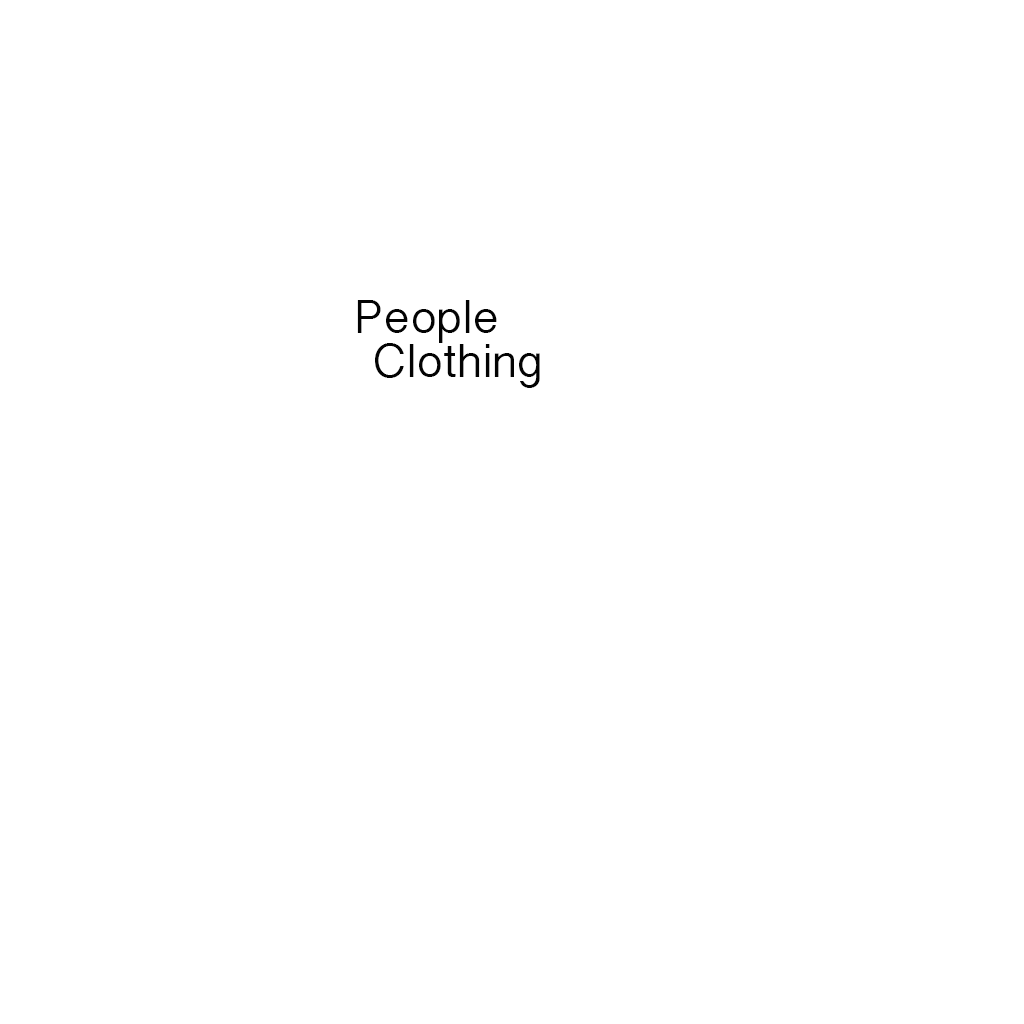
<style>
.page{position:relative;width:1024px;height:1024px;background:#ffffff}
.page>*{position:absolute;margin:0}
.t1{font:48px "MyanmarSangamMN";color:#030303}
</style>
<div class="page">
<p class="t1" style="left:357px;top:300px;width:140px;height:43px">People</p>
<p class="t1" style="left:375px;top:343px;width:165px;height:45px">Clothing</p>
</div>
